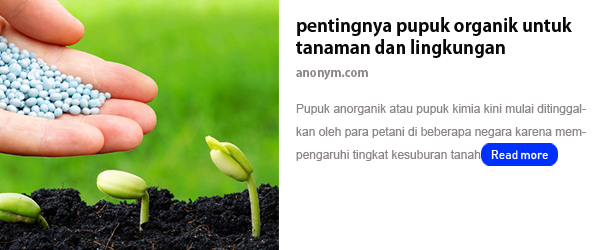
<style>
.page{position:relative;width:600px;height:250px;background:#ffffff}
.page>*{position:absolute;margin:0}
.t1{font:18px "AdobeGothicStd-Bold";color:#090909}
.t2{font:12px "AdobeGothicStd-Bold";color:#8c8585}
.t3{font:12px/23px "ArialMT";color:#8c8585}
.t4{font:12px "Bahnschrift";color:#ffffff}
</style>
<div class="page">
<p class="t1" style="left:296px;top:17px;width:276px;height:41px">pentingnya pupuk organik untuk tanaman dan lingkungan</p>
<p class="t2" style="left:296px;top:70px;width:72px;height:10px">anonym.com</p>
<p class="t3" style="left:296px;top:104px;width:290px;height:57px;text-align:justify">Pupuk anorganik atau pupuk kimia kini mulai ditinggalkan oleh para petani di beberapa negara karena mempengaruhi tingkat kesuburan tanah</p>
<p class="t4" style="left:491px;top:150px;width:57px;height:10px">Read more</p>
</div>
